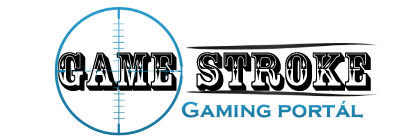
<style>
.page{position:relative;width:400px;height:140px;background:#ffffff}
.page>*{position:absolute;margin:0}
.t1{font:50.7px "RosewoodStd-Regular";color:#000000}
</style>
<div class="page">
<p class="t1" style="left:58px;top:52px;width:313px;height:39px">GAME  STROKE</p>
</div>
